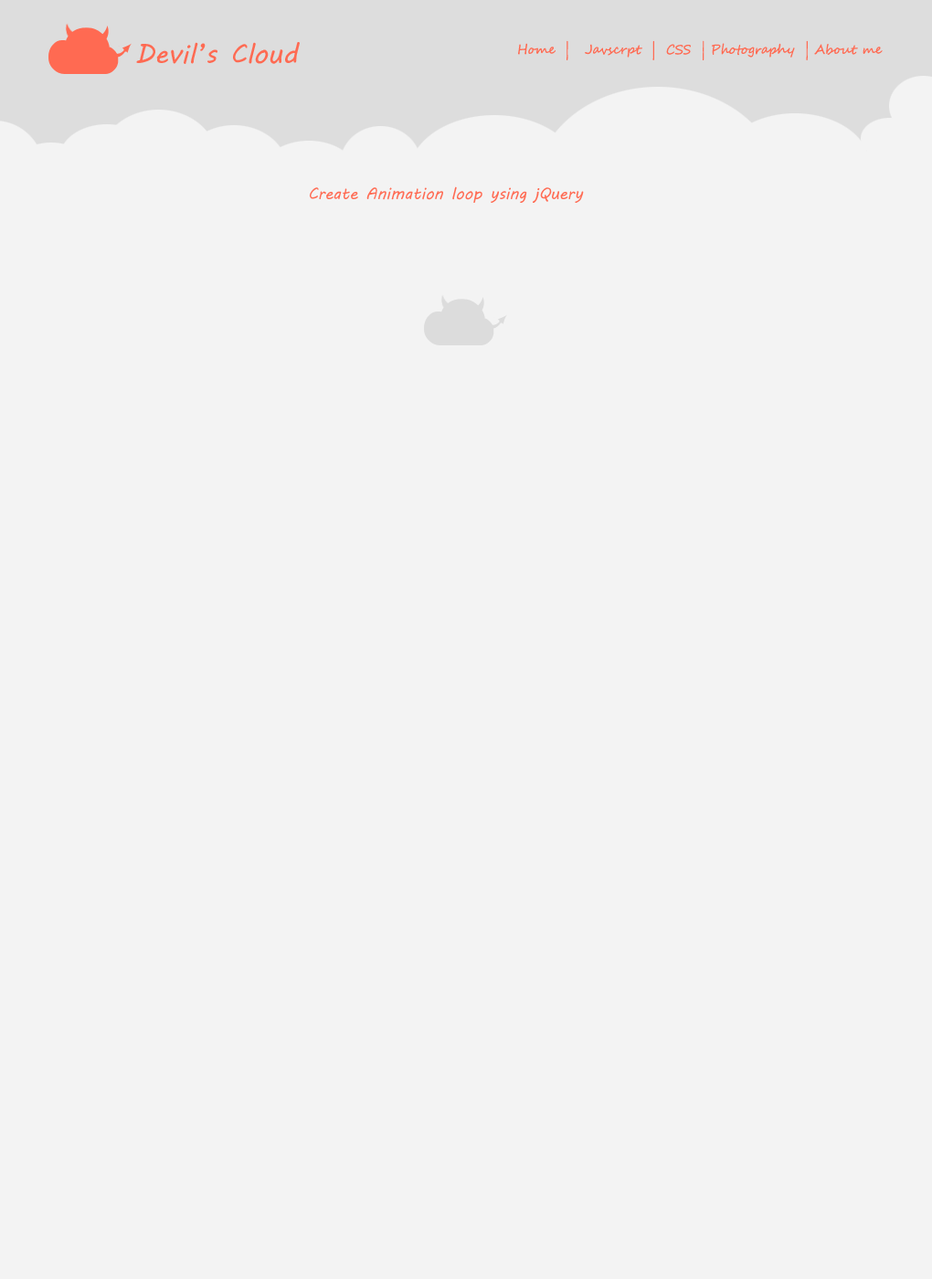
<style>
.page{position:relative;width:932px;height:1279px;background:#f3f3f3}
.page>*{position:absolute;margin:0}
.t1{font:12.8px "SegoeScript";color:#ff6a52}
.t2{font:27.4px "MVBoli";color:#ff6a52}
.t3{font:16.4px "MVBoli";color:#ff6a52}
</style>
<div class="page">
<p class="t1" style="left:518px;top:40px;width:365px;height:20px">Home  |   Javscrpt  |  CSS  | Photography  | About me</p>
<p class="t2" style="left:136px;top:42px;width:164px;height:22px">Devil’s Cloud</p>
<p class="t3" style="left:310px;top:186px;width:274px;height:17px">Create Animation loop ysing jQuery</p>
</div>
